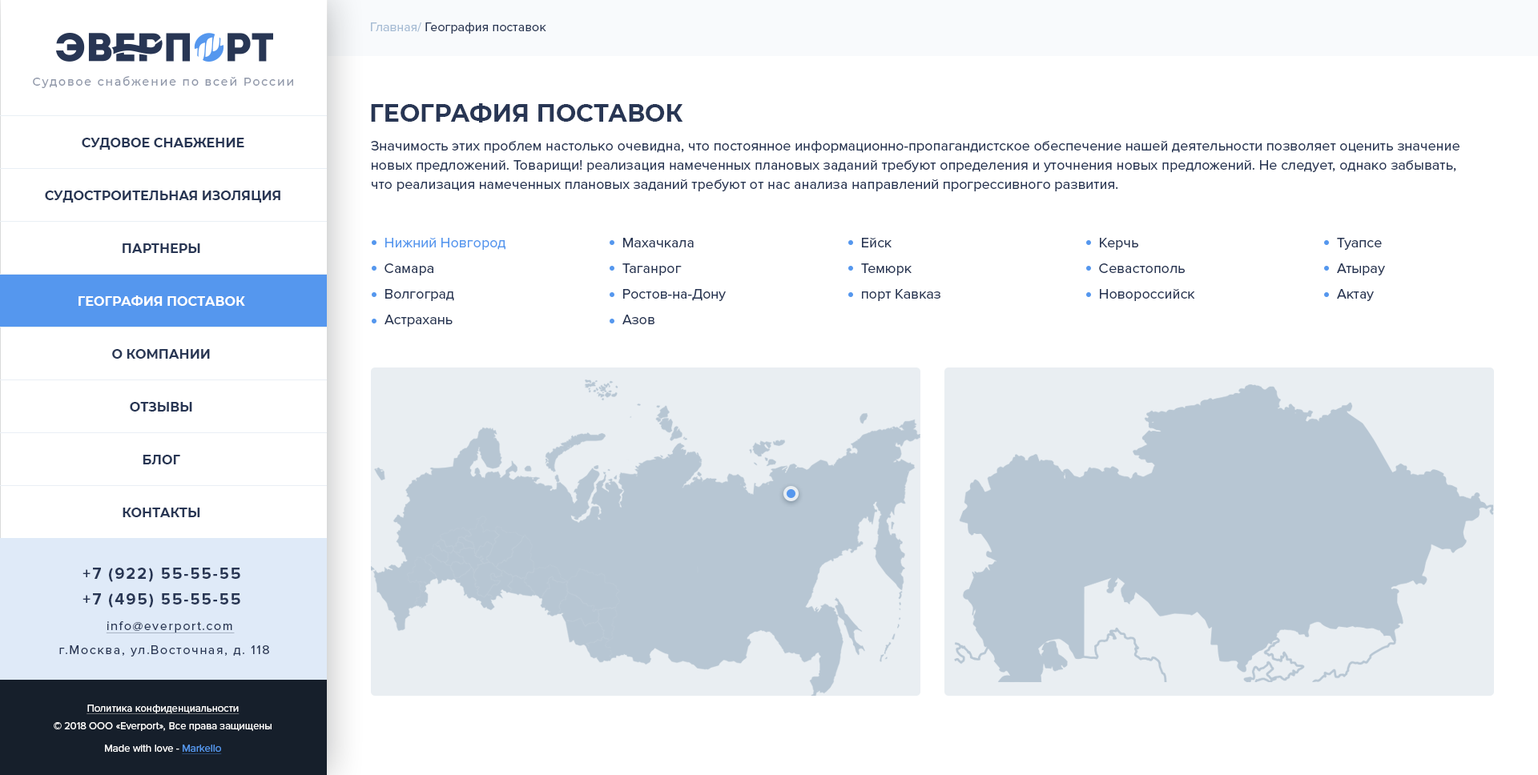
<style>
.page{position:relative;width:1538px;height:775px;background:#ffffff}
.page>*{position:absolute;margin:0}
.t1{font:12.8px "ProximaNova-Regular";color:#283654}
.t2{font:12.8px "ProximaNova-Regular";color:#a6bcd4}
.t3{font:11.2px "Montserrat-Medium";letter-spacing:0.135em;color:#8e96a8}
.t4{font:24px "Montserrat-Bold";color:#283654;text-transform:uppercase}
.t5{font:12.8px/52.9px "Montserrat-Bold";color:#283654;text-transform:uppercase}
.t6{font:12.8px/52.9px "Montserrat-Bold";color:#ffffff;text-transform:uppercase}
.t7{font:14.4px/19.2px "ProximaNova-Regular";color:#283654}
.t8{font:14.4px/25.6px "ProximaNova-Regular";color:#283654}
.t9{font:14.4px/25.6px "ProximaNova-Regular";color:#5597ee}
.t10{font:16px "ProximaNova-Bold";letter-spacing:0.1em;color:#283654}
.t11{font:12.8px "ProximaNova-Regular";letter-spacing:0.1em;color:#283654;text-decoration:underline}
.t12{font:12.8px "ProximaNova-Regular";letter-spacing:0.1em;color:#283654}
.t13{font:10.4px/17.6px "ProximaNova-Regular";color:#ffffff}
.t14{font:10.4px/16px "ProximaNova-Regular";color:#ffffff;text-decoration:underline}
.t15{font:10.4px "ProximaNova-Regular";color:#ffffff}
.t16{font:10.4px "ProximaNova-Regular";color:#5597ee;text-decoration:underline}
</style>
<div class="page">
<p class="t1" style="left:371px;top:22px;width:175px;height:12px"><span class="t2">Главная/ </span>География поставок</p>
<p class="t3" style="left:33px;top:76px;width:260px;height:12px">Судовое снабжение по всей России</p>
<p class="t4" style="left:371px;top:103px;width:312px;height:20px">География поставок</p>
<p class="t5" style="left:45px;top:138px;width:235px;height:379px;text-align:center">Судовое снабжение<br> Судостроительная изоляция<br>Партнеры<br><span class="t6">География поставок<br></span>О компании<br>Отзывы<br>блог<br>контакты</p>
<p class="t7" style="left:371px;top:140px;width:1088px;height:51px">Значимость этих проблем настолько очевидна, что постоянное информационно-пропагандистское обеспечение нашей деятельности позволяет оценить значение новых предложений. Товарищи! реализация намеченных плановых заданий требуют определения и уточнения новых предложений. Не следует, однако забывать, что реализация намеченных плановых заданий требуют от нас анализа направлений прогрессивного развития.</p>
<p class="t8" style="left:384px;top:237px;width:121px;height:90px"><span class="t9">Нижний Новгород<br></span>Самара<br>Волгоград<br>Астрахань</p>
<p class="t8" style="left:622px;top:238px;width:104px;height:86px">Махачкала<br>Таганрог<br>Ростов-на-Дону<br>Азов</p>
<p class="t8" style="left:861px;top:237px;width:79px;height:64px">Ейск<br>Темюрк<br>порт Кавказ</p>
<p class="t8" style="left:1099px;top:238px;width:96px;height:63px">Керчь<br>Севастополь<br>Новороссийск</p>
<p class="t8" style="left:1337px;top:238px;width:48px;height:63px">Туапсе<br>Атырау<br>Актау</p>
<p class="t10" style="left:83px;top:568px;width:157px;height:14px">+7 (922) 55-55-55</p>
<p class="t10" style="left:83px;top:594px;width:157px;height:14px">+7 (495) 55-55-55</p>
<p class="t11" style="left:106px;top:622px;width:129px;height:12px">info@everport.com</p>
<p class="t12" style="left:59px;top:646px;width:210px;height:11px">г.Москва, ул.Восточная, д. 118</p>
<p class="t13" style="left:54px;top:705px;width:218px;height:26px;text-align:center"><span class="t14">Политика конфиденциальности<br></span>© 2018 ООО «Everport», Все права защищены</p>
<p class="t15" style="left:105px;top:745px;width:117px;height:10px">Made with love - <span class="t16">Markello</span></p>
</div>
